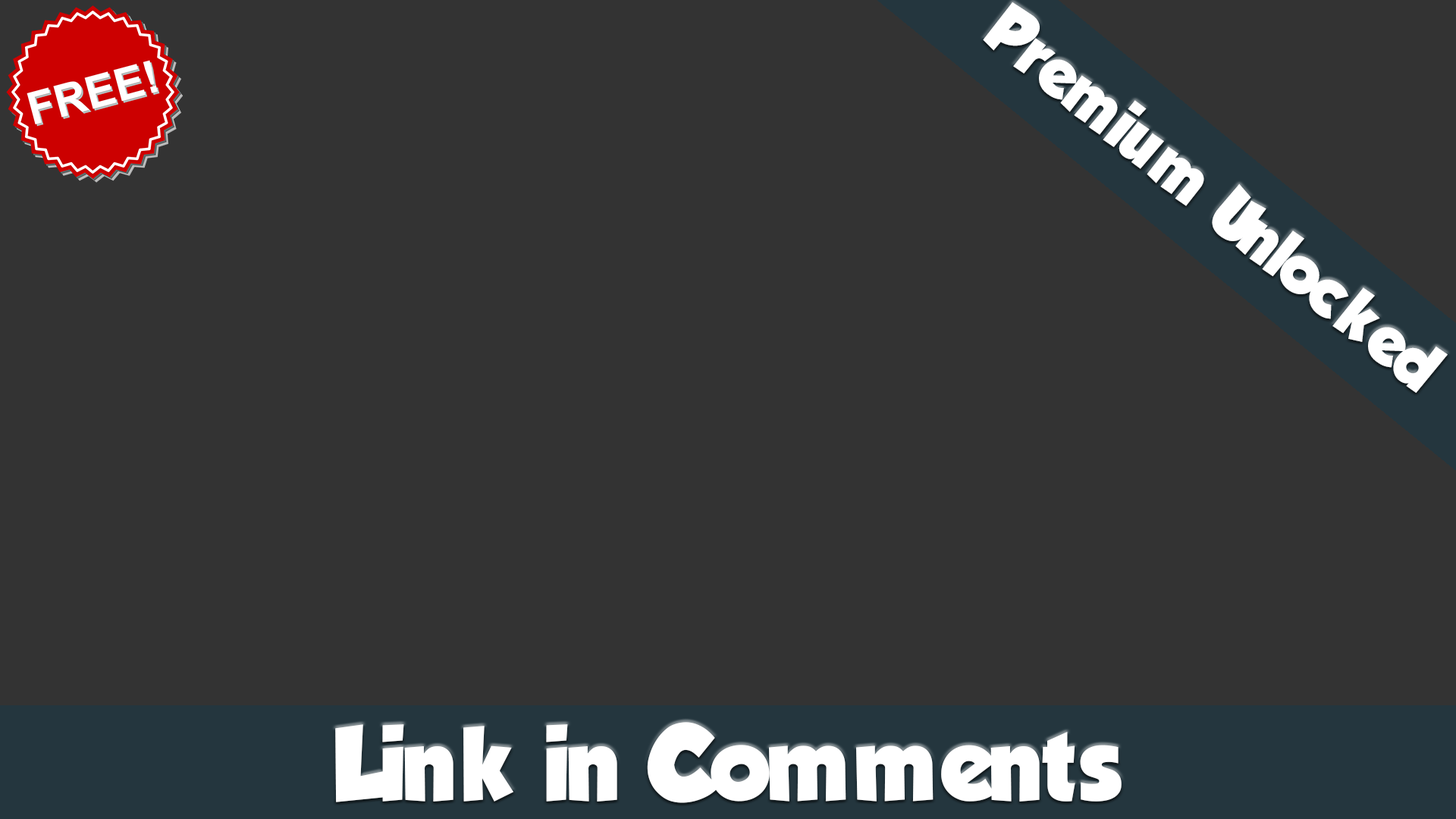
<style>
.page{position:relative;width:1456px;height:819px;background:#333333}
.page>*{position:absolute;margin:0}
.t1{font:75.8px "TadeoFont-Bold";color:#ffffff}
.t2{font:113.7px "TadeoFont-Bold";color:#ffffff}
</style>
<div class="page">
<p class="t1" style="left:983px;top:2px;width:465px;height:391px;rotate:39deg">Premium Unlocked</p>
<p class="t2" style="left:335px;top:722px;width:787px;height:81px">Link in Comments</p>
</div>
